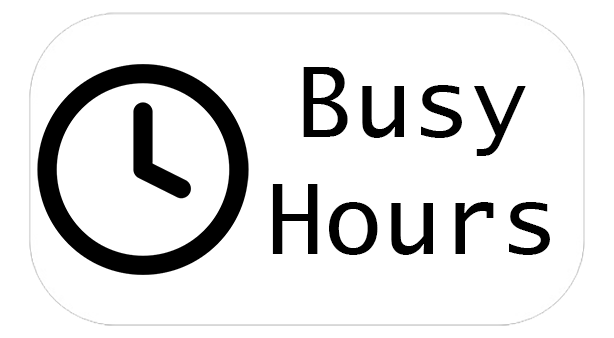
<style>
.page{position:relative;width:614px;height:338px;background:#ffffff}
.page>*{position:absolute;margin:0}
.t1{font:97px "LucidaSans-Typewriter";color:#000000}
</style>
<div class="page">
<p class="t1" style="left:272px;top:67px;width:278px;height:188px;text-align:center">Busy<br>Hours</p>
</div>
